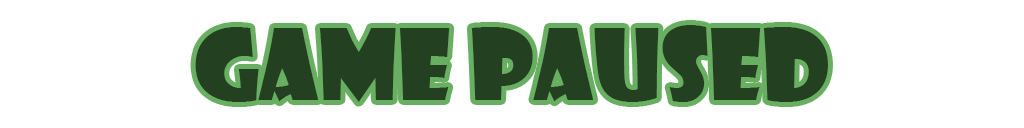
<style>
.page{position:relative;width:1024px;height:128px;background:#ffffff}
.page>*{position:absolute;margin:0}
.t1{font:96px "ShowcardGothic-Reg";color:#234021}
</style>
<div class="page">
<p class="t1" style="left:195px;top:25px;width:633px;height:77px">GAME PAUSED</p>
</div>
